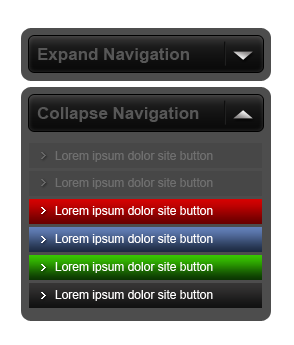
<style>
.page{position:relative;width:294px;height:345px;background:#ffffff}
.page>*{position:absolute;margin:0}
.t1{font:17px "Arial-BoldMT";color:#575757}
.t2{font:12px "ArialMT";color:#6f6f6f}
.t3{font:12px "ArialMT";color:#fefdfd}
</style>
<div class="page">
<p class="t1" style="left:38px;top:48px;width:151px;height:15px">Expand Navigation</p>
<p class="t1" style="left:37px;top:107px;width:162px;height:15px">Collapse Navigation</p>
<p class="t2" style="left:55px;top:151px;width:158px;height:11px">Lorem ipsum dolor site button</p>
<p class="t2" style="left:55px;top:178px;width:158px;height:11px">Lorem ipsum dolor site button</p>
<p class="t3" style="left:55px;top:206px;width:158px;height:11px">Lorem ipsum dolor site button</p>
<p class="t3" style="left:55px;top:234px;width:158px;height:11px">Lorem ipsum dolor site button</p>
<p class="t3" style="left:55px;top:262px;width:158px;height:11px">Lorem ipsum dolor site button</p>
<p class="t3" style="left:55px;top:290px;width:158px;height:11px">Lorem ipsum dolor site button</p>
</div>
